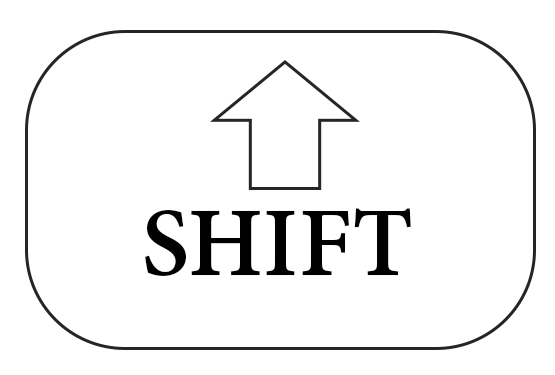
<style>
.page{position:relative;width:555px;height:375px;background:#ffffff}
.page>*{position:absolute;margin:0}
.t1{font:107px "AdobeGurmukhi-Bold";color:#000000}
</style>
<div class="page">
<p class="t1" style="left:145px;top:208px;width:266px;height:68px">SHIFT</p>
</div>
